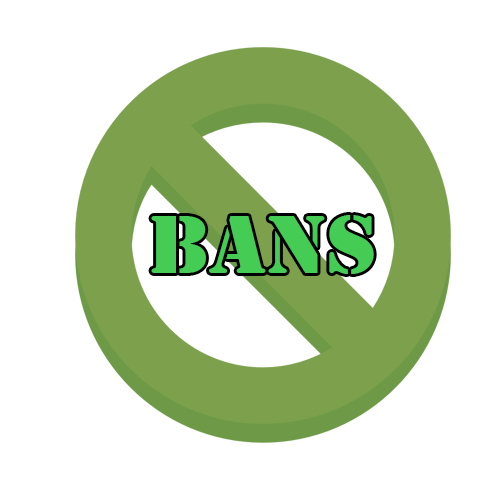
<style>
.page{position:relative;width:500px;height:500px;background:#ffffff}
.page>*{position:absolute;margin:0}
.t1{font:85.7px "Stencil";color:#44cc55;scale:1.06 1}
</style>
<div class="page">
<p class="t1" style="left:151px;top:215px;width:223px;height:59px">Bans</p>
</div>
